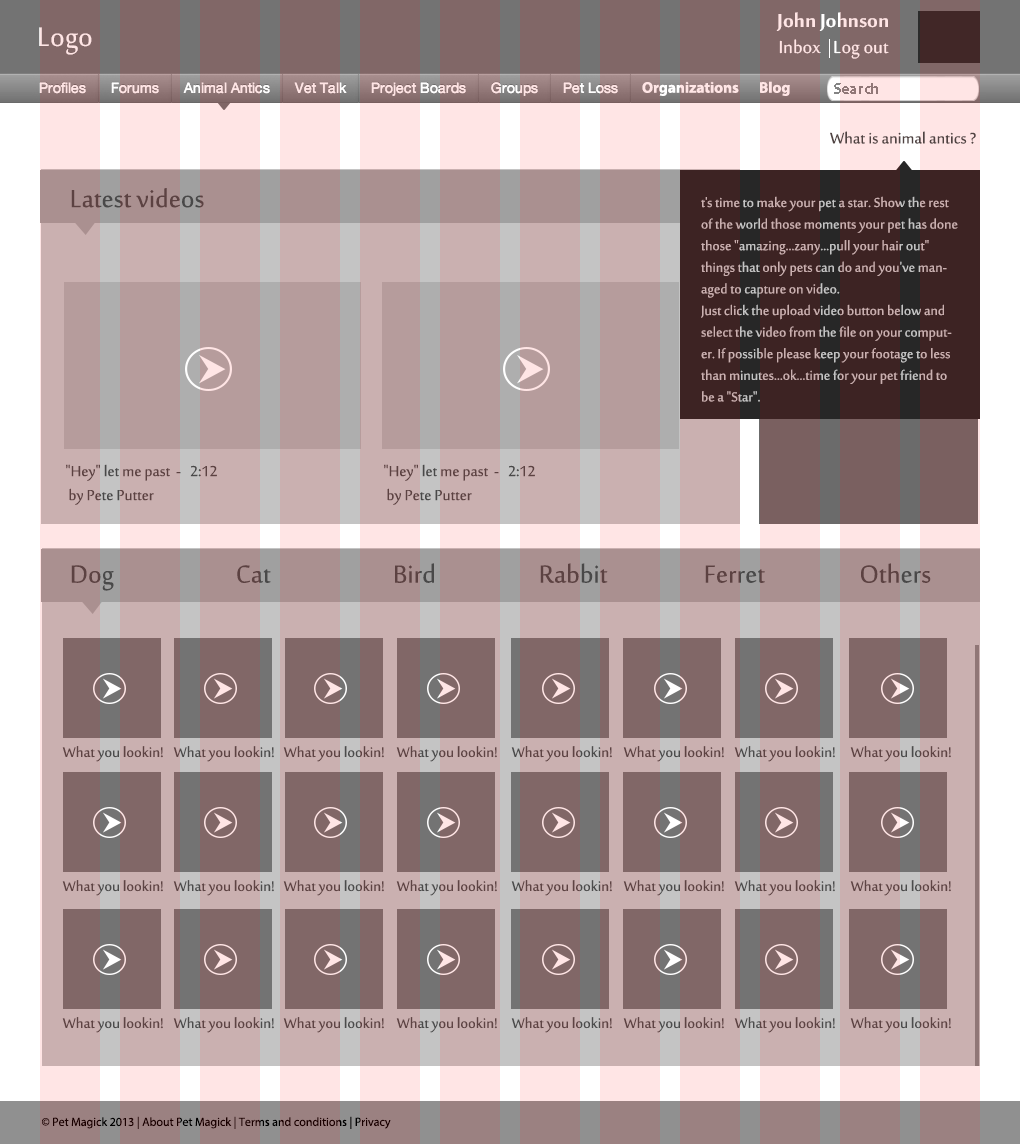
<style>
.page{position:relative;width:1020px;height:1144px}
.page>*{position:absolute;margin:0}
.t1{font:25.9px "SakkalMajallaBold";color:#ffe5e5}
.t2{font:36.8px "SakkalMajalla";color:#ffe5e5}
.t3{font:24.1px "SakkalMajalla";color:#ffe5e5}
.t4{font:15.4px "MyriadPro-Bold";color:#ffe5e5}
.t5{font:15.4px "MyriadPro-Bold";color:#8b7d7d}
.t6{font:21px "SakkalMajalla";color:#504342}
.t7{font:34px "SakkalMajalla";color:#504342}
.t8{font:18px "SakkalMajalla";color:#c9bfbf}
.t9{font:20px "SakkalMajalla";color:#504342}
.t10{font:19.1px "SakkalMajalla";color:#524747}
.t11{font:12px "MyriadPro-Regular";color:#1a0000}
</style>
<div class="page">
<p class="t1" style="left:776px;top:12px;width:112px;height:19px">John Johnson</p>
<p class="t2" style="left:39px;top:27px;width:53px;height:28px">Logo</p>
<p class="t3" style="left:779px;top:39px;width:42px;height:15px">Inbox</p>
<p class="t3" style="left:834px;top:40px;width:55px;height:19px">Log out</p>
<p class="t4" style="left:642px;top:81px;width:97px;height:15px">Organizations</p>
<p class="t4" style="left:760px;top:81px;width:30px;height:15px">Blog</p>
<p class="t5" style="left:834px;top:83px;width:44px;height:11px">Search</p>
<p class="t6" style="left:830px;top:131px;width:146px;height:13px">What is animal antics ?</p>
<p class="t7" style="left:71px;top:188px;width:133px;height:20px">Latest videos</p>
<p class="t8" style="left:701px;top:196px;width:257px;height:206px">t's time to make your pet a star. Show the rest of the world those moments your pet has done those "amazing...zany...pull your hair out" things that only pets can do and you've managed to capture on video. <br>Just click the upload video button below and select the video from the file on your computer. If possible please keep your footage to less than minutes...ok...time for your pet friend to be a "Star".</p>
<p class="t9" style="left:66px;top:464px;width:151px;height:41px">"Hey" let me past  -   2:12<br> by Pete Putter</p>
<p class="t9" style="left:384px;top:464px;width:151px;height:41px">"Hey" let me past  -   2:12<br> by Pete Putter</p>
<p class="t7" style="left:71px;top:565px;width:43px;height:26px">Dog</p>
<p class="t7" style="left:237px;top:565px;width:34px;height:18px">Cat</p>
<p class="t7" style="left:395px;top:563px;width:39px;height:20px">Bird</p>
<p class="t7" style="left:540px;top:563px;width:68px;height:20px">Rabbit</p>
<p class="t7" style="left:705px;top:565px;width:60px;height:18px">Ferret</p>
<p class="t7" style="left:861px;top:563px;width:70px;height:20px">Others</p>
<p class="t10" style="left:62px;top:746px;width:101px;height:16px">What you lookin!</p>
<p class="t10" style="left:173px;top:746px;width:101px;height:16px">What you lookin!</p>
<p class="t10" style="left:283px;top:746px;width:101px;height:16px">What you lookin!</p>
<p class="t10" style="left:396px;top:746px;width:101px;height:16px">What you lookin!</p>
<p class="t10" style="left:511px;top:746px;width:101px;height:16px">What you lookin!</p>
<p class="t10" style="left:623px;top:746px;width:101px;height:16px">What you lookin!</p>
<p class="t10" style="left:734px;top:746px;width:101px;height:16px">What you lookin!</p>
<p class="t10" style="left:850px;top:746px;width:101px;height:16px">What you lookin!</p>
<p class="t10" style="left:62px;top:880px;width:101px;height:16px">What you lookin!</p>
<p class="t10" style="left:173px;top:880px;width:101px;height:16px">What you lookin!</p>
<p class="t10" style="left:283px;top:880px;width:101px;height:16px">What you lookin!</p>
<p class="t10" style="left:396px;top:880px;width:101px;height:16px">What you lookin!</p>
<p class="t10" style="left:511px;top:880px;width:101px;height:16px">What you lookin!</p>
<p class="t10" style="left:623px;top:880px;width:101px;height:16px">What you lookin!</p>
<p class="t10" style="left:734px;top:880px;width:101px;height:16px">What you lookin!</p>
<p class="t10" style="left:850px;top:880px;width:101px;height:16px">What you lookin!</p>
<p class="t10" style="left:62px;top:1017px;width:101px;height:16px">What you lookin!</p>
<p class="t10" style="left:173px;top:1017px;width:101px;height:16px">What you lookin!</p>
<p class="t10" style="left:283px;top:1017px;width:101px;height:16px">What you lookin!</p>
<p class="t10" style="left:396px;top:1017px;width:101px;height:16px">What you lookin!</p>
<p class="t10" style="left:511px;top:1017px;width:101px;height:16px">What you lookin!</p>
<p class="t10" style="left:623px;top:1017px;width:101px;height:16px">What you lookin!</p>
<p class="t10" style="left:734px;top:1017px;width:101px;height:16px">What you lookin!</p>
<p class="t10" style="left:850px;top:1017px;width:101px;height:16px">What you lookin!</p>
<p class="t11" style="left:42px;top:1116px;width:349px;height:13px">© Pet Magick 2013 | About Pet Magick | Terms and conditions | Privacy</p>
</div>
